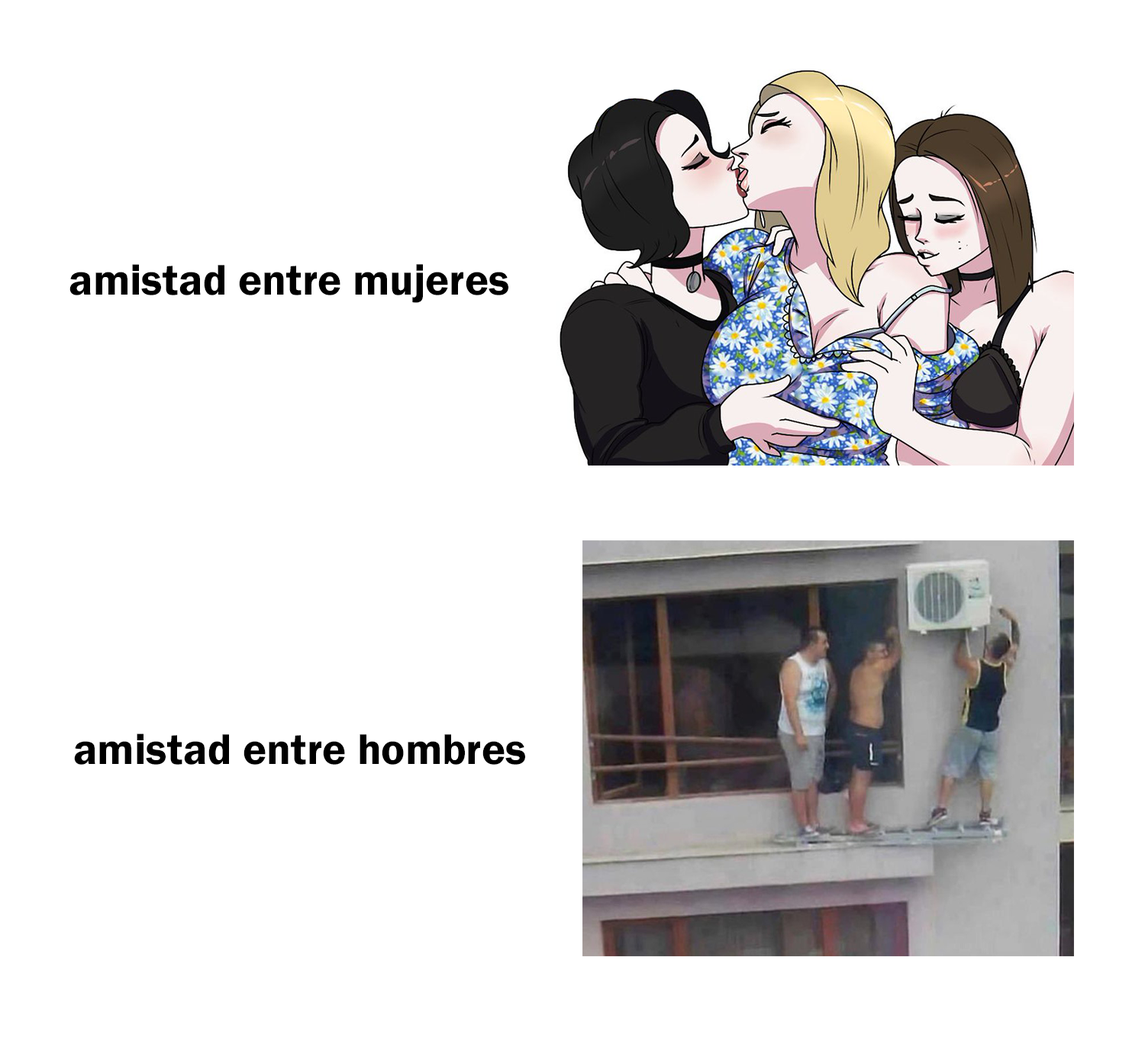
<style>
.page{position:relative;width:1145px;height:1041px;background:#ffffff}
.page>*{position:absolute;margin:0}
.t1{font:44.6px "FranklinGothic-Demi";color:#000000}
</style>
<div class="page">
<p class="t1" style="left:69px;top:264px;width:439px;height:39px">amistad entre mujeres</p>
<p class="t1" style="left:74px;top:734px;width:451px;height:31px">amistad entre hombres</p>
</div>
